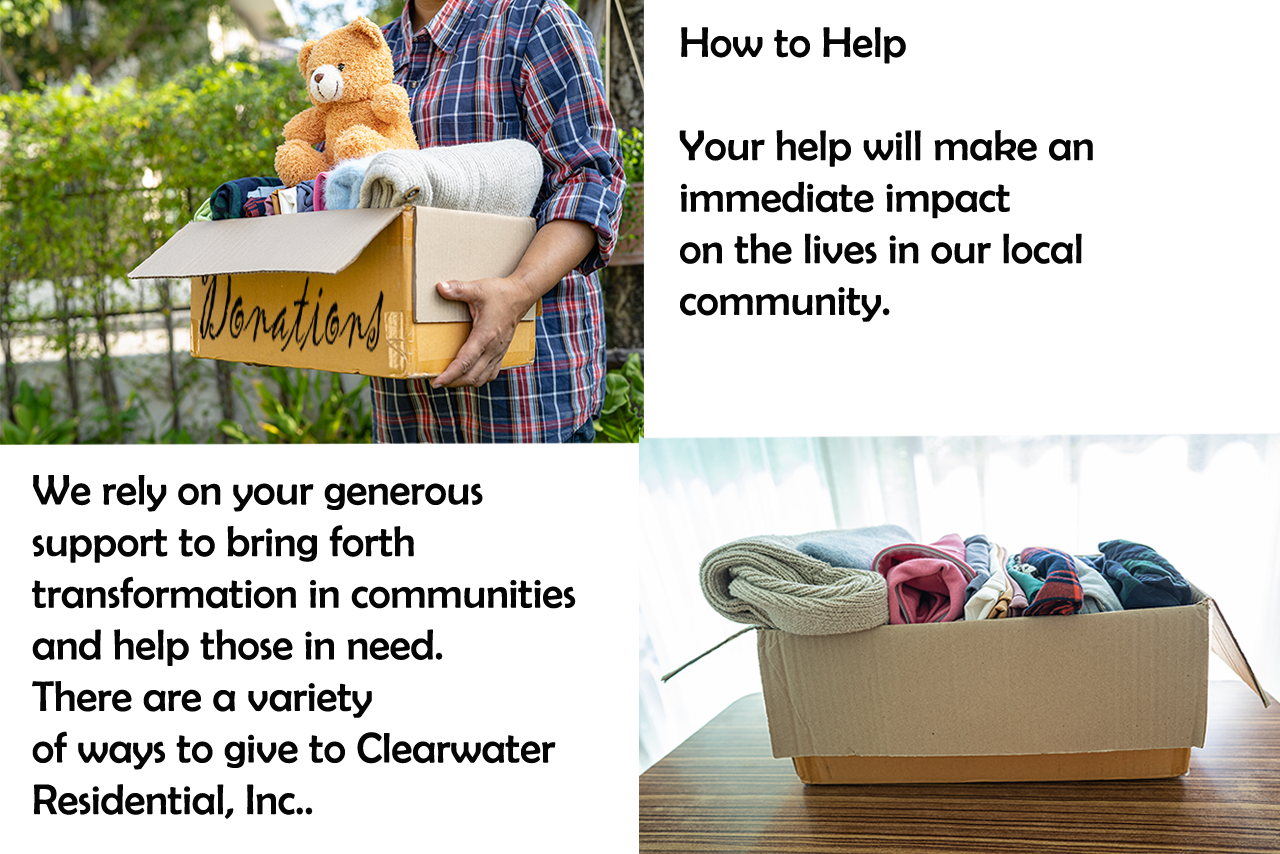
<style>
.page{position:relative;width:1280px;height:854px;background:#ffffff}
.page>*{position:absolute;margin:0}
.t1{font:43px "BerlinSansFB-Reg";color:#050505}
</style>
<div class="page">
<p class="t1" style="left:679px;top:27px;width:414px;height:295px">How to Help<br><br>Your help will make an <br>immediate impact <br>on the lives in our local <br>community.</p>
<p class="t1" style="left:32px;top:475px;width:544px;height:344px">We rely on your generous <br>support to bring forth <br>transformation in communities <br>and help those in need. <br>There are a variety <br>of ways to give to Clearwater <br>Residential, Inc..</p>
</div>
